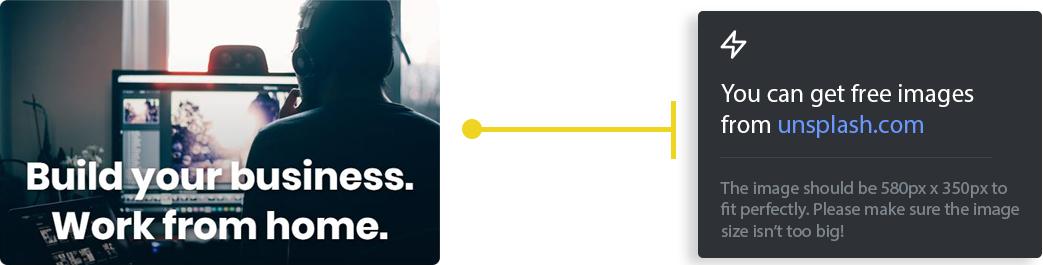
<style>
.page{position:relative;width:1043px;height:265px;background:#2e3135}
.page>*{position:absolute;margin:0}
.t1{font:25.6px "MyriadPro-Regular";color:#fffefe}
.t2{font:25.6px "MyriadPro-Regular";color:#6a97fa}
.t3{font:17.9px "MyriadPro-Regular";color:#7d858e}
</style>
<div class="page">
<p class="t1" style="left:721px;top:84px;width:253px;height:54px">You can get free images <br>from <span class="t2">unsplash.com</span></p>
<p class="t3" style="left:720px;top:181px;width:299px;height:60px">The image should be 580px x 350px to <br>fit perfectly. Please make sure the image<br>size isn’t too big!</p>
</div>
